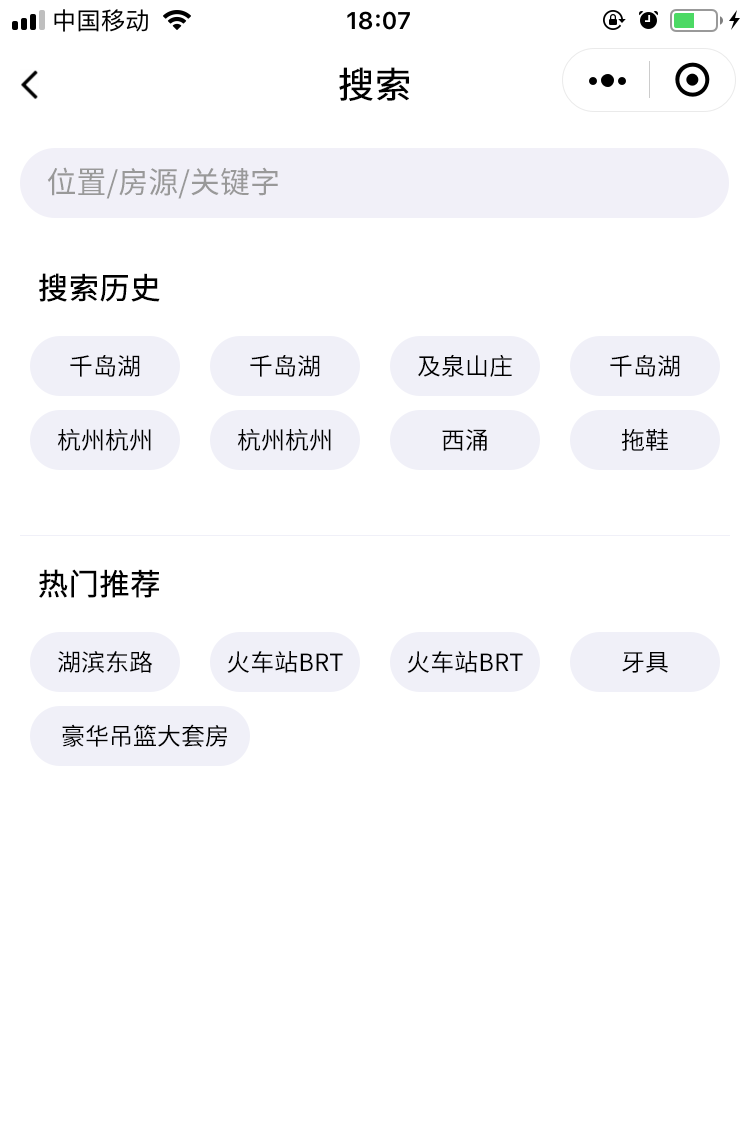
<style>
.page{position:relative;width:750px;height:1142px;background:#ffffff}
.page>*{position:absolute;margin:0}
.t1{font:36px "SourceHanSansCN-Regular";color:#000000;font-weight:bold}
.t2{font:30px "SourceHanSansCN-Regular";color:#999999}
.t3{font:30px "SourceHanSansCN-Regular";color:#000000;font-weight:bold}
.t4{font:24px "SourceHanSansCN-Regular";color:#000000}
</style>
<div class="page">
<p class="t1" style="left:339px;top:67px;width:70px;height:34px">搜索</p>
<p class="t2" style="left:47px;top:167px;width:231px;height:32px">位置/房源/关键字</p>
<p class="t3" style="left:39px;top:273px;width:121px;height:29px">搜索历史</p>
<p class="t4" style="left:70px;top:355px;width:70px;height:22px">千岛湖</p>
<p class="t4" style="left:250px;top:355px;width:70px;height:22px">千岛湖</p>
<p class="t4" style="left:418px;top:354px;width:94px;height:23px">及泉山庄</p>
<p class="t4" style="left:610px;top:355px;width:70px;height:22px">千岛湖</p>
<p class="t4" style="left:57px;top:428px;width:94px;height:23px">杭州杭州</p>
<p class="t4" style="left:237px;top:428px;width:94px;height:23px">杭州杭州</p>
<p class="t4" style="left:442px;top:429px;width:45px;height:22px">西涌</p>
<p class="t4" style="left:621px;top:428px;width:47px;height:23px">拖鞋</p>
<p class="t3" style="left:39px;top:569px;width:120px;height:29px">热门推荐</p>
<p class="t4" style="left:58px;top:651px;width:95px;height:22px">湖滨东路</p>
<p class="t4" style="left:227px;top:651px;width:116px;height:22px">火车站BRT</p>
<p class="t4" style="left:407px;top:651px;width:116px;height:22px">火车站BRT</p>
<p class="t4" style="left:622px;top:652px;width:46px;height:21px">牙具</p>
<p class="t4" style="left:62px;top:724px;width:165px;height:23px">豪华吊篮大套房</p>
</div>
